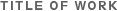
<style>
.page{position:relative;width:117px;height:11px;background:#ffffff}
.page>*{position:absolute;margin:0}
.t1{font:12px "SpartanLTStd-HeavyClass";letter-spacing:0.06em;color:#5e5d5d;text-transform:uppercase}
</style>
<div class="page">
<p class="t1" style="left:0px;top:1px;width:117px;height:9px">Title of work</p>
</div>
